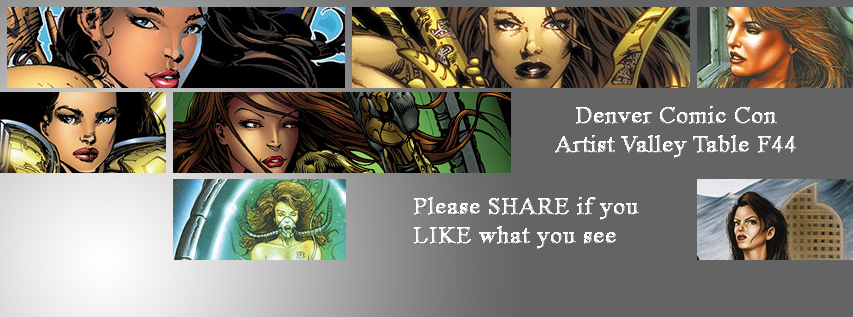
<style>
.page{position:relative;width:853px;height:317px;background:#646464}
.page>*{position:absolute;margin:0}
.t1{font:24px "TimesNewRomanPSMT";font-weight:bold}
</style>
<div class="page">
<p class="t1" style="left:555px;top:106px;width:241px;height:52px;text-align:center">Denver Comic Con<br>Artist Valley Table F44</p>
<p class="t1" style="left:414px;top:197px;width:225px;height:52px">Please SHARE if you<br>LIKE what you see</p>
</div>
